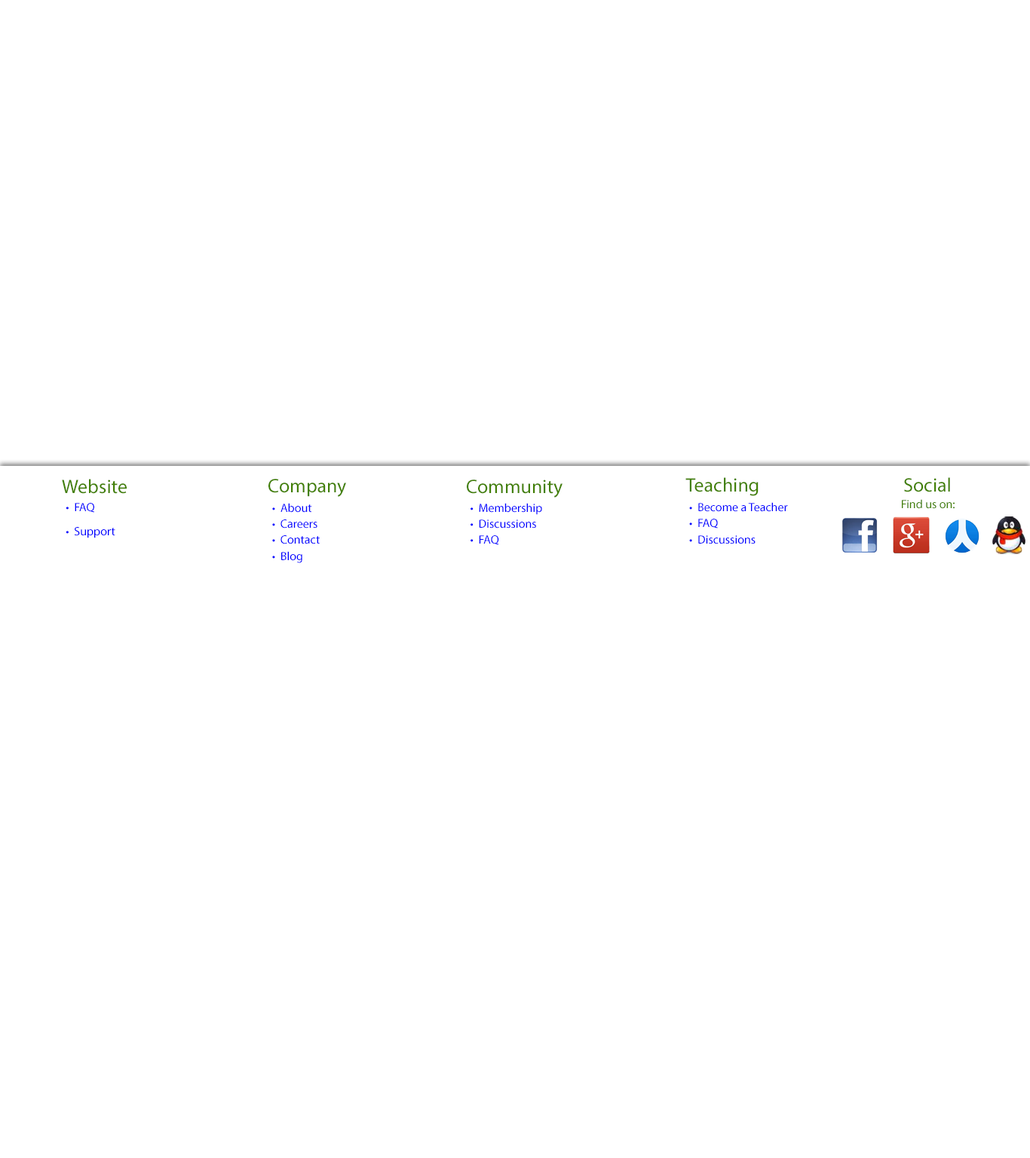
<style>
.page{position:relative;width:1030px;height:1158px;background:#ffffff}
.page>*{position:absolute;margin:0}
.t1{font:19.6px "MyriadPro-Regular";color:#428005}
.t2{font:12.1px "MyriadPro-Regular";color:#0000ff}
.t3{font:12.1px "MyriadPro-Regular";color:#428005}
</style>
<div class="page">
<p class="t1" style="left:62px;top:479px;width:65px;height:15px">Website</p>
<p class="t1" style="left:268px;top:479px;width:78px;height:18px">Company</p>
<p class="t1" style="left:467px;top:479px;width:95px;height:19px">Community</p>
<p class="t1" style="left:685px;top:477px;width:73px;height:19px">Teaching</p>
<p class="t1" style="left:904px;top:477px;width:46px;height:15px">Social</p>
<p class="t2" style="left:66px;top:503px;width:49px;height:35px">•  FAQ<br><br>•  Support</p>
<p class="t2" style="left:272px;top:503px;width:48px;height:60px">•  About<br>•  Careers<br>•  Contact<br>•  Blog</p>
<p class="t2" style="left:470px;top:503px;width:72px;height:42px">•  Membership<br>•  Discussions<br>•  FAQ</p>
<p class="t2" style="left:689px;top:502px;width:99px;height:42px">•  Become a Teacher<br>•  FAQ<br>•  Discussions</p>
<p class="t3" style="left:902px;top:499px;width:52px;height:10px">Find us on:</p>
</div>
